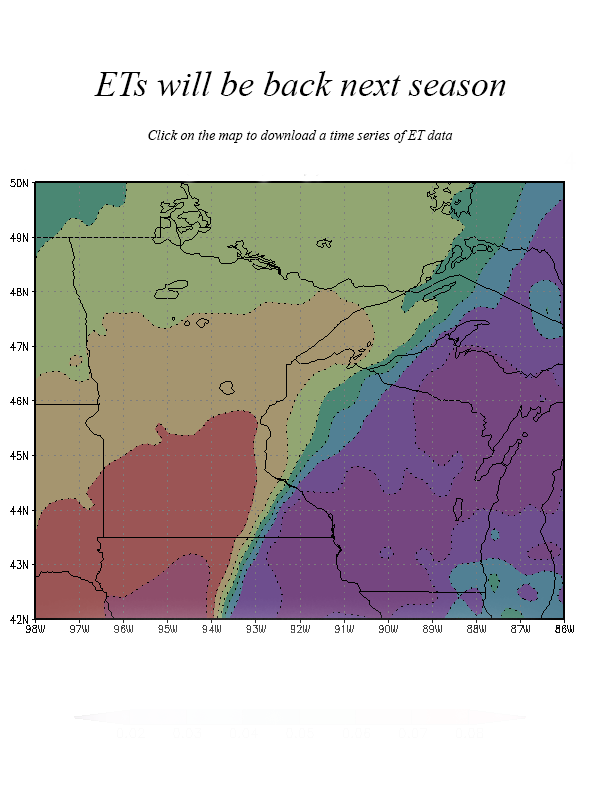
<style>
.page{position:relative;width:600px;height:800px;background:#ffffff}
.page>*{position:absolute;margin:0}
.t1{font:36px "TimesNewRomanPS-ItalicMT";color:#000000}
.t2{font:14px "TimesNewRomanPS-ItalicMT";color:#000000}
</style>
<div class="page">
<p class="t1" style="left:94px;top:71px;width:412px;height:25px">ETs will be back next season</p>
<p class="t2" style="left:148px;top:130px;width:305px;height:13px">Click on the map to download a time series of ET data</p>
</div>
